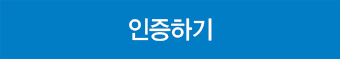
<style>
.page{position:relative;width:340px;height:59px;background:#007dc5}
.page>*{position:absolute;margin:0}
.t1{font:25px "YDVYGO33";letter-spacing:-0.025em;color:#ffffff;scale:0.95 1}
</style>
<div class="page">
<p class="t1" style="left:129px;top:18px;width:83px;height:23px">인증하기</p>
</div>
